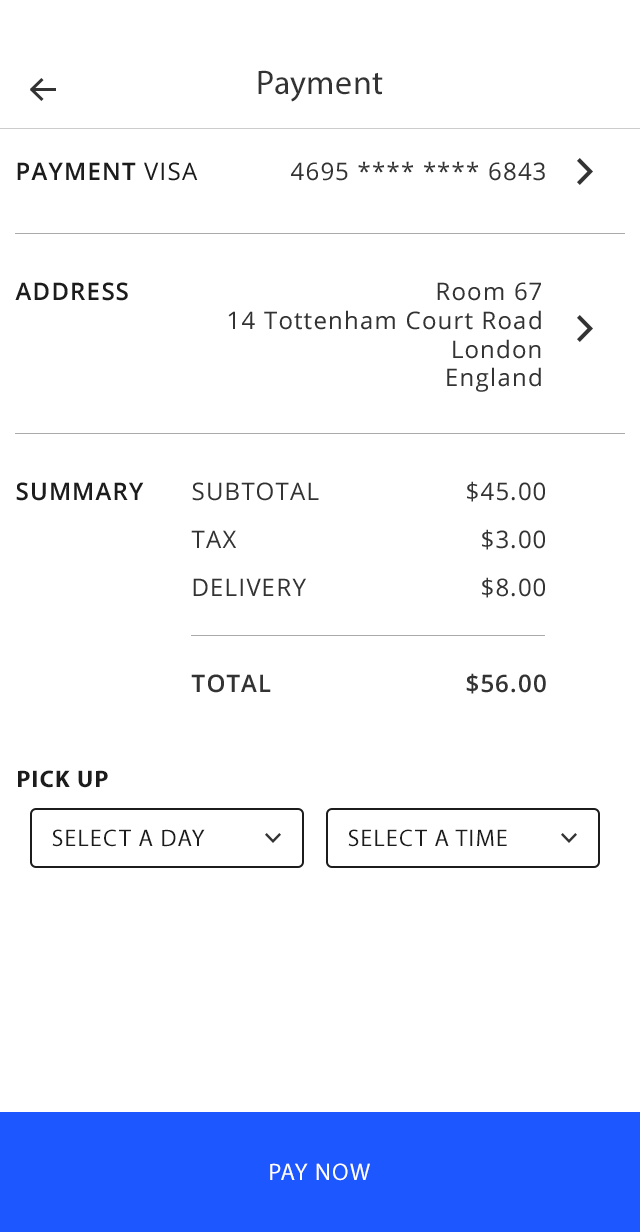
<style>
.page{position:relative;width:640px;height:1232px;background:#ffffff}
.page>*{position:absolute;margin:0}
.t1{font:34px "MyriadPro-Regular";letter-spacing:0.01em;color:#333333}
.t2{font:24px "OpenSans";letter-spacing:0.05em;color:#333333;text-transform:uppercase}
.t3{font:24px "OpenSans-Semibold";letter-spacing:0.05em;color:#1c1c1c;text-transform:uppercase}
.t4{font:24px "OpenSans";letter-spacing:0.05em;color:#1c1c1c;text-transform:uppercase}
.t5{font:24px "OpenSans";letter-spacing:0.05em;color:#333333}
.t6{font:24px/48px "OpenSans";letter-spacing:0.05em;color:#333333;text-transform:uppercase}
.t7{font:24px/48px "OpenSans-Semibold";letter-spacing:0.05em;color:#333333;text-transform:uppercase}
.t8{font:24px "MyriadPro-Bold";letter-spacing:0.05em;color:#1c1c1c;text-transform:uppercase}
.t9{font:24px "MyriadPro-Regular";letter-spacing:0.05em;color:#1c1c1c;text-transform:uppercase}
.t10{font:24px "MyriadPro-Regular";letter-spacing:0.05em;color:#ffffff;text-transform:uppercase}
</style>
<div class="page">
<p class="t1" style="left:258px;top:70px;width:125px;height:32px">Payment</p>
<p class="t2" style="left:291px;top:161px;width:254px;height:20px">4695 **** **** 6843</p>
<p class="t3" style="left:17px;top:162px;width:181px;height:19px">payment <span class="t4">visa</span></p>
<p class="t3" style="left:15px;top:282px;width:113px;height:19px">address</p>
<p class="t5" style="left:228px;top:282px;width:313px;height:110px;text-align:right">Room 67<br>14 Tottenham Court Road<br>London<br>England</p>
<p class="t3" style="left:16px;top:482px;width:128px;height:19px">summary</p>
<p class="t6" style="left:191px;top:482px;width:128px;height:211px">subtotal<br>tax<br>delivery<br><br><span class="t7">total</span></p>
<p class="t6" style="left:466px;top:481px;width:80px;height:213px;text-align:right">$45.00<br>$3.00<br>$8.00<br><br><span class="t7">$56.00</span></p>
<p class="t8" style="left:18px;top:770px;width:90px;height:18px">PICK UP</p>
<p class="t9" style="left:52px;top:829px;width:153px;height:18px">SELECT A DAY</p>
<p class="t9" style="left:348px;top:829px;width:159px;height:18px">SELECT A TIME</p>
<p class="t10" style="left:270px;top:1163px;width:100px;height:18px">PAY NOW</p>
</div>
